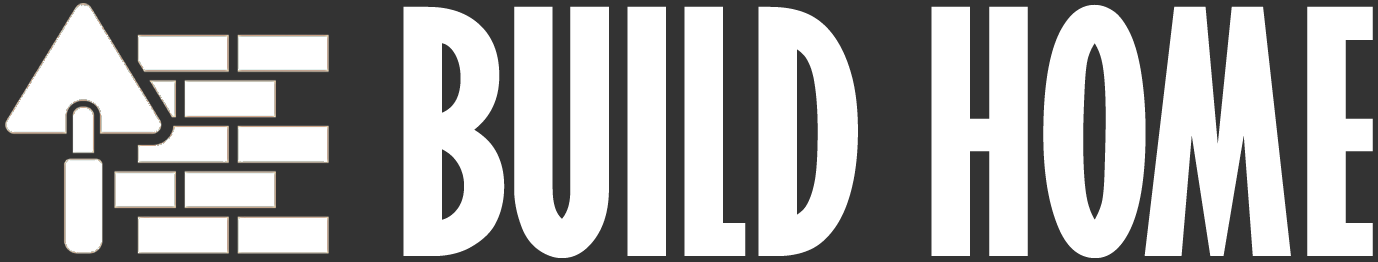
<style>
.page{position:relative;width:1378px;height:262px;background:#ffffff}
.page>*{position:absolute;margin:0}
.t1{font:312.8px "GillSansMT-ExtraCondensedBold";color:#ffffff;scale:1.14 1}
</style>
<div class="page">
<p class="t1" style="left:403px;top:4px;width:970px;height:254px">BUILD HOME</p>
</div>
